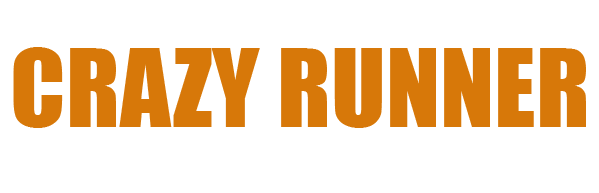
<style>
.page{position:relative;width:599px;height:193px;background:#ffffff}
.page>*{position:absolute;margin:0}
.t1{font:100px "Impact";color:#d77809}
</style>
<div class="page">
<p class="t1" style="left:13px;top:47px;width:573px;height:81px">CRAZY RUNNER</p>
</div>
